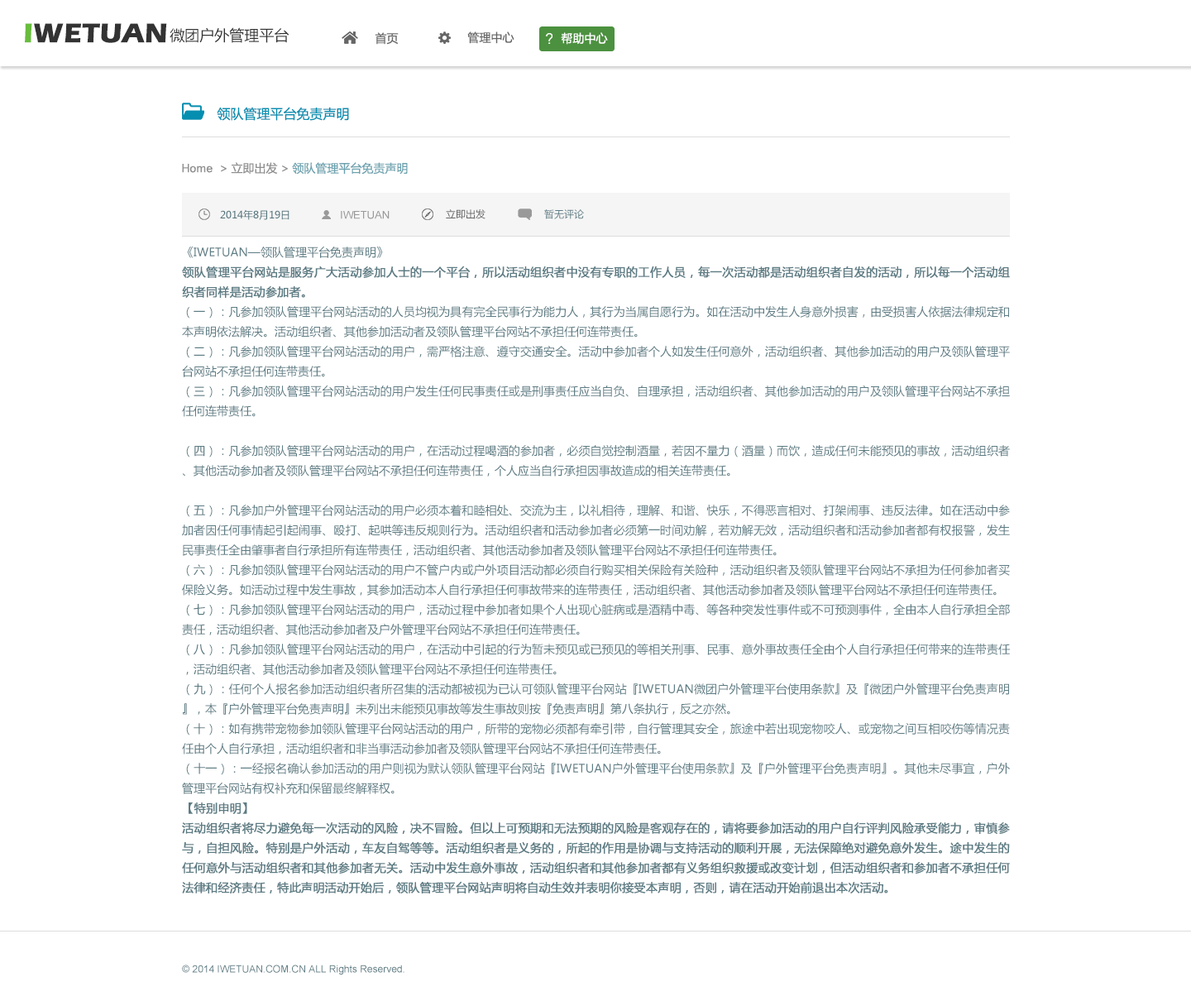
<style>
.page{position:relative;width:1191px;height:1001px;background:#ffffff}
.page>*{position:absolute;margin:0}
.t1{font:28.1px "ErasITC-Bold";color:#333333}
.t2{font:28.1px "ErasITC-Bold";color:#67bd3c}
.t3{font:14.9px "MicrosoftYaHei";color:#333333}
.t4{font:11.6px "MicrosoftYaHei";color:#666666}
.t5{font:11.6px "MicrosoftYaHei";color:#ffffff}
.t6{font:13.2px "MicrosoftYaHei";color:#048eb0}
.t7{font:11.6px "MicrosoftYaHei";color:#6ca2af}
.t8{font:11.6px "ArialMT";color:#8f8f8f}
.t9{font:11.6px "MicrosoftYaHei";color:#8f8f8f}
.t10{font:9.9px "MicrosoftYaHei";color:#4e717a}
.t11{font:9.9px "MicrosoftYaHei";color:#666666}
.t12{font:9.9px "MicrosoftYaHei";color:#5d7c84}
.t13{font:10.8px "ArialMT";color:#999999}
.t14{font:11.6px/19.9px "MicrosoftYaHei";color:#5d7c84}
.t15{font:11.6px/19.9px "MicrosoftYaHei";color:#5d7c84;font-weight:bold}
.t16{font:9.9px "ArialMT";color:#5d7c84}
</style>
<div class="page">
<p class="t1" style="left:25px;top:23px;width:142px;height:20px"><span class="t2">I</span>WETUAN</p>
<p class="t3" style="left:170px;top:27px;width:120px;height:16px">微团户外管理平台</p>
<p class="t4" style="left:375px;top:32px;width:24px;height:13px">首页</p>
<p class="t4" style="left:467px;top:31px;width:48px;height:13px">管理中心</p>
<p class="t5" style="left:561px;top:32px;width:47px;height:13px">帮助中心</p>
<p class="t6" style="left:217px;top:107px;width:132px;height:14px">领队管理平台免责声明</p>
<p class="t7" style="left:182px;top:162px;width:226px;height:13px"><span class="t8">Home  </span><span class="t9">&gt; 立即出发 &gt; </span>领队管理平台免责声明</p>
<p class="t10" style="left:220px;top:209px;width:70px;height:11px">2014年8月19日</p>
<p class="t11" style="left:446px;top:209px;width:40px;height:10px">立即出发</p>
<p class="t12" style="left:544px;top:209px;width:40px;height:10px">暂无评论</p>
<p class="t13" style="left:341px;top:211px;width:49px;height:8px">IWETUAN</p>
<p class="t14" style="left:182px;top:246px;width:828px;height:647px;text-align:justify">《IWETUAN—领队管理平台免责声明》<br><span class="t15">领队管理平台网站是服务广大活动参加人士的一个平台，所以活动组织者中没有专职的工作人员，每一次活动都是活动组织者自发的活动，所以每一个活动组织者同样是活动参加者。<br></span>（一）：凡参加领队管理平台网站活动的人员均视为具有完全民事行为能力人，其行为当属自愿行为。如在活动中发生人身意外损害，由受损害人依据法律规定和本声明依法解决。活动组织者、其他参加活动者及领队管理平台网站不承担任何连带责任。<br>（二）：凡参加领队管理平台网站活动的用户，需严格注意、遵守交通安全。活动中参加者个人如发生任何意外，活动组织者、其他参加活动的用户及领队管理平台网站不承担任何连带责任。<br>（三）：凡参加领队管理平台网站活动的用户发生任何民事责任或是刑事责任应当自负、自理承担，活动组织者、其他参加活动的用户及领队管理平台网站不承担任何连带责任。<br><br>（四）：凡参加领队管理平台网站活动的用户，在活动过程喝酒的参加者，必须自觉控制酒量，若因不量力（酒量）而饮，造成任何未能预见的事故，活动组织者、其他活动参加者及领队管理平台网站不承担任何连带责任，个人应当自行承担因事故造成的相关连带责任。<br><br>（五）：凡参加户外管理平台网站活动的用户必须本着和睦相处、交流为主，以礼相待，理解、和谐、快乐，不得恶言相对、打架闹事、违反法律。如在活动中参加者因任何事情起引起闹事、殴打、起哄等违反规则行为。活动组织者和活动参加者必须第一时间劝解，若劝解无效，活动组织者和活动参加者都有权报警，发生民事责任全由肇事者自行承担所有连带责任，活动组织者、其他活动参加者及领队管理平台网站不承担任何连带责任。<br>（六）：凡参加领队管理平台网站活动的用户不管户内或户外项目活动都必须自行购买相关保险有关险种，活动组织者及领队管理平台网站不承担为任何参加者买保险义务。如活动过程中发生事故，其参加活动本人自行承担任何事故带来的连带责任，活动组织者、其他活动参加者及领队管理平台网站不承担任何连带责任。<br>（七）：凡参加领队管理平台网站活动的用户，活动过程中参加者如果个人出现心脏病或是酒精中毒、等各种突发性事件或不可预测事件，全由本人自行承担全部责任，活动组织者、其他活动参加者及户外管理平台网站不承担任何连带责任。<br>（八）：凡参加领队管理平台网站活动的用户，在活动中引起的行为暂未预见或已预见的等相关刑事、民事、意外事故责任全由个人自行承担任何带来的连带责任，活动组织者、其他活动参加者及领队管理平台网站不承担任何连带责任。<br>（九）：任何个人报名参加活动组织者所召集的活动都被视为已认可领队管理平台网站『IWETUAN微团户外管理平台使用条款』及『微团户外管理平台免责声明』，本『户外管理平台免责声明』未列出未能预见事故等发生事故则按『免责声明』第八条执行，反之亦然。<br>（十）：如有携带宠物参加领队管理平台网站活动的用户，所带的宠物必须都有牵引带，自行管理其安全，旅途中若出现宠物咬人、或宠物之间互相咬伤等情况责任由个人自行承担，活动组织者和非当事活动参加者及领队管理平台网站不承担任何连带责任。<br>（十一）：一经报名确认参加活动的用户则视为默认领队管理平台网站『IWETUAN户外管理平台使用条款』及『户外管理平台免责声明』。其他未尽事宜，户外管理平台网站有权补充和保留最终解释权。<br><span class="t15">【特别申明】 <br>活动组织者将尽力避免每一次活动的风险，决不冒险。但以上可预期和无法预期的风险是客观存在的，请将要参加活动的用户自行评判风险承受能力，审慎参与，自担风险。特别是户外活动，车友自驾等等。活动组织者是义务的，所起的作用是协调与支持活动的顺利开展，无法保障绝对避免意外发生。途中发生的任何意外与活动组织者和其他参加者无关。活动中发生意外事故，活动组织者和其他参加者都有义务组织救援或改变计划，但活动组织者和参加者不承担任何法律和经济责任，特此声明活动开始后，领队管理平台网站声明将自动生效并表明你接受本声明，否则，请在活动开始前退出本次活动。</span></p>
<p class="t16" style="left:182px;top:965px;width:223px;height:10px">© 2014 IWETUAN.COM.CN ALL Rights Reserved.</p>
</div>
